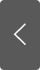
<style>
.page{position:relative;width:40px;height:70px;background:#595959}
.page>*{position:absolute;margin:0}
.t1{font:30px "LetterGothicStd";color:#ffffff}
</style>
<div class="page">
<p class="t1" style="left:13px;top:23px;width:13px;height:22px">&lt;</p>
</div>
